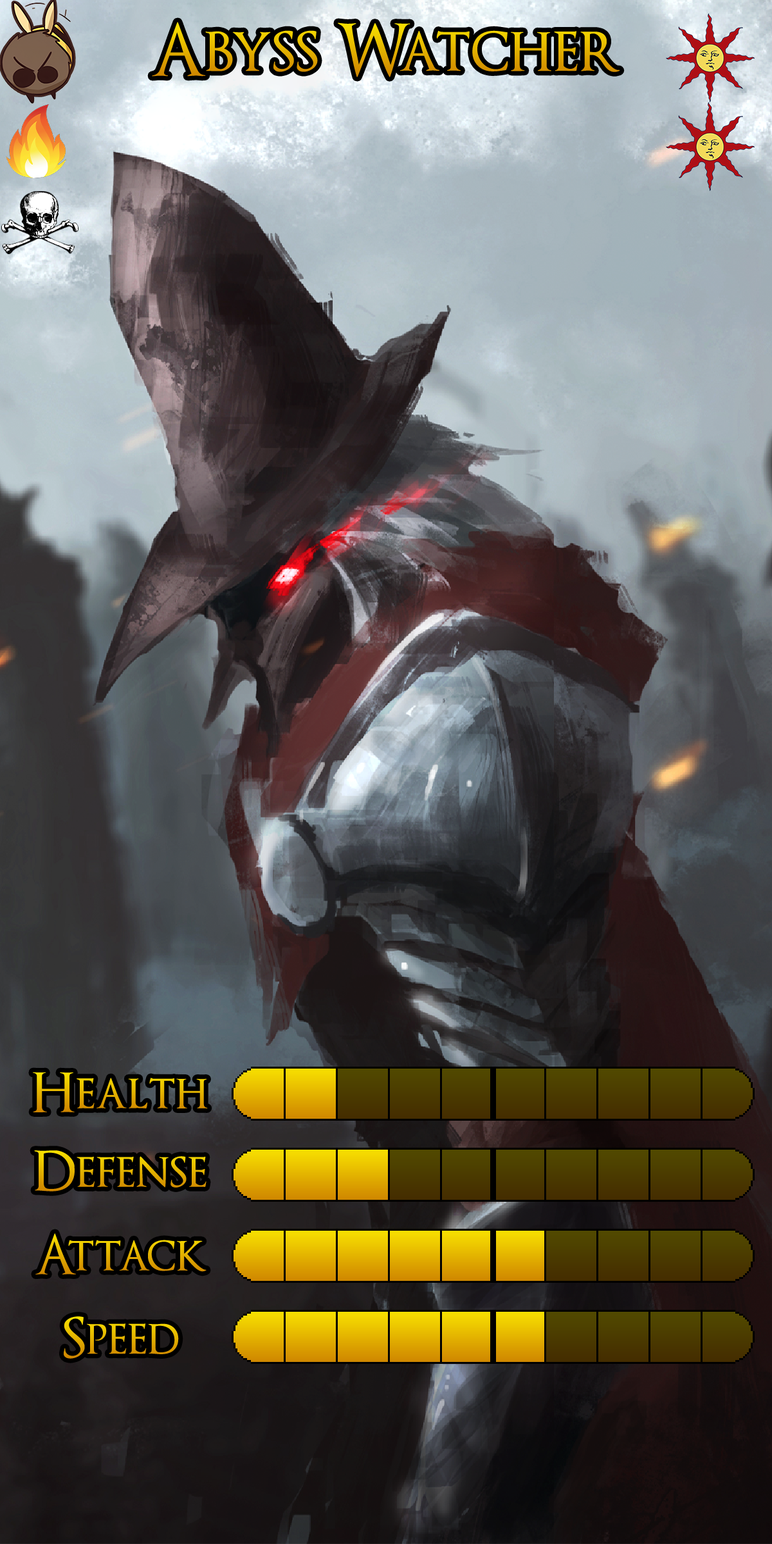
<style>
.page{position:relative;width:772px;height:1544px}
.page>*{position:absolute;margin:0}
.t1{font:122.3px "OptimusPrinceps"}
.t2{font:92.7px "OptimusPrinceps"}
</style>
<div class="page">
<p class="t1" style="left:152px;top:22px;width:468px;height:55px">Abyss Watcher</p>
<p class="t2" style="left:33px;top:1072px;width:175px;height:41px">Health</p>
<p class="t2" style="left:34px;top:1151px;width:173px;height:41px">Defense</p>
<p class="t2" style="left:35px;top:1234px;width:172px;height:41px">Attack</p>
<p class="t2" style="left:64px;top:1317px;width:115px;height:42px">Speed</p>
</div>
